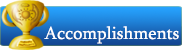
<style>
.page{position:relative;width:182px;height:50px}
.page>*{position:absolute;margin:0}
.t1{font:18px "Sylfaen";color:#ffffff}
</style>
<div class="page">
<p class="t1" style="left:44px;top:26px;width:135px;height:18px">Accomplishments</p>
</div>
